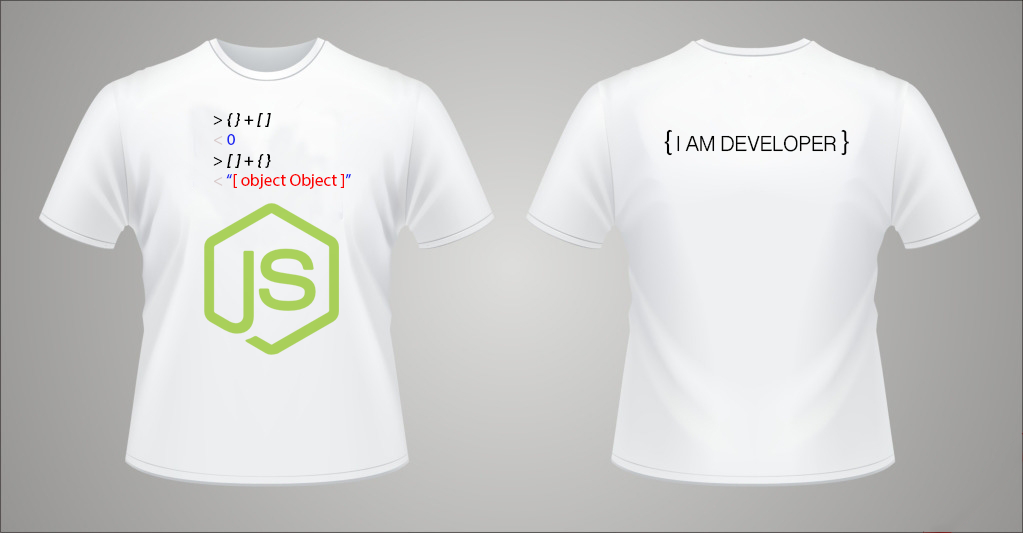
<style>
.page{position:relative;width:1023px;height:533px}
.page>*{position:absolute;margin:0}
.t1{font:17px "MyriadPro-Regular";color:#fb0303}
.t2{font:17px "MyriadPro-Regular";color:#000000}
.t3{font:17px "MyriadPro-BoldIt";color:#000000}
.t4{font:17px "MyriadPro-Regular";color:#d9cccc}
.t5{font:17px "MyriadPro-Regular";color:#1c26f2}
.t6{font:20px "SinhalaSangamMN-Bold";color:#010100}
.t7{font:25px "SinhalaSangamMN-Bold";color:#010100}
</style>
<div class="page">
<p class="t1" style="left:213px;top:113px;width:138px;height:76px"><span class="t2">&gt; </span><span class="t3">{ } + [ ]<br></span><span class="t4">&lt; </span><span class="t5">0<br></span><span class="t2">&gt; </span><span class="t3">[ ] + { }<br></span><span class="t4">&lt; </span><span class="t5">“</span>[ object Object ]<span class="t5">”</span></p>
<p class="t6" style="left:664px;top:129px;width:185px;height:27px"><span class="t7">{</span> I AM DEVELOPER <span class="t7">}</span></p>
</div>
